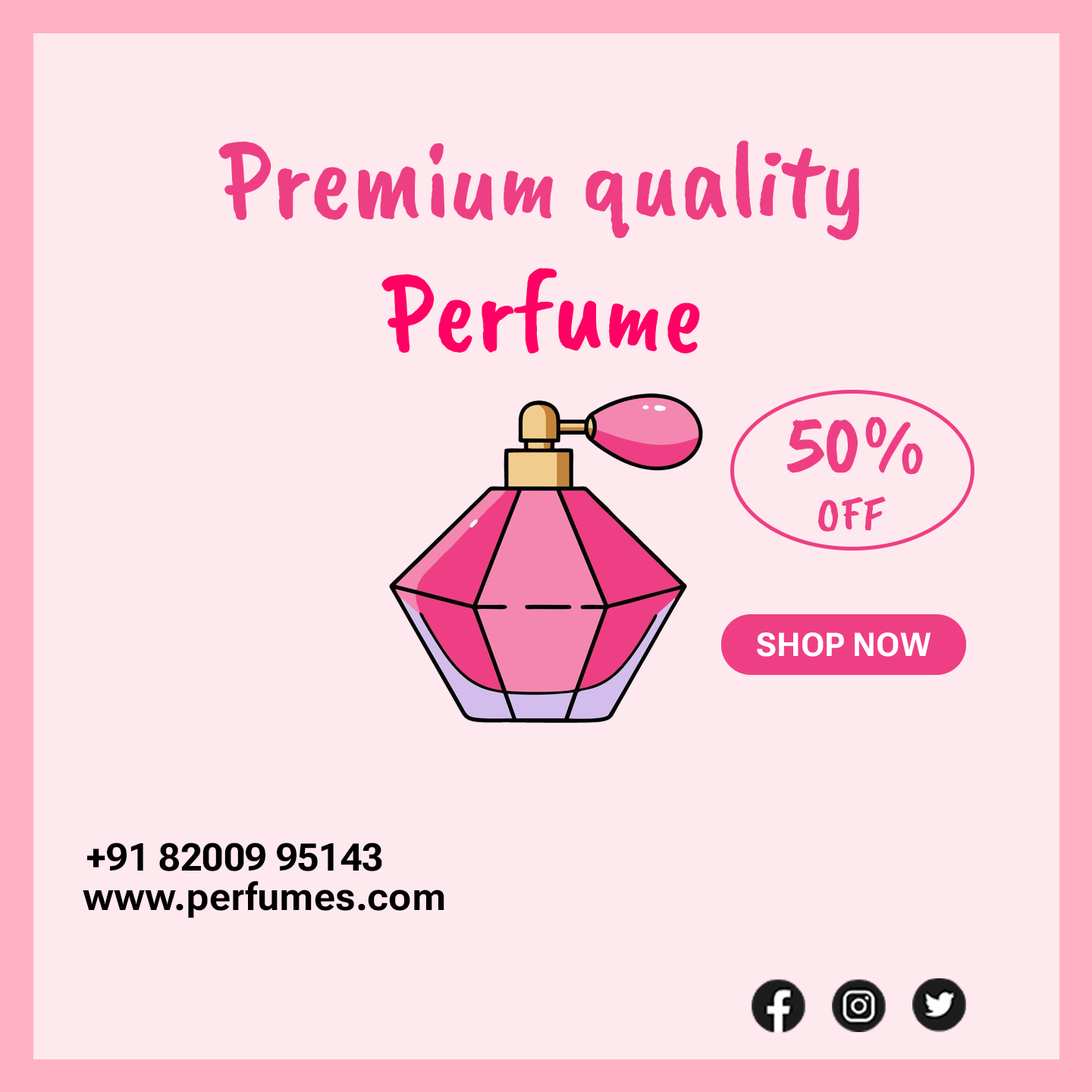
<style>
.page{position:relative;width:1092px;height:1092px;background:#fee9ee}
.page>*{position:absolute;margin:0}
.t1{font:110.6px "CaveatBrush-Regular";color:#ee3f84}
.t2{font:110.6px "CaveatBrush-Regular";color:#ff0065}
.t3{font:82.6px "CaveatBrush-Regular";color:#ee3f84}
.t4{font:47.4px "CaveatBrush-Regular";color:#ee3f84}
.t5{font:32.4px "RobotoFlex-Bold";color:#ffffff}
.t6{font:38.1px "RobotoFlex-Bold";color:#000000}
</style>
<div class="page">
<p class="t1" style="left:218px;top:140px;width:641px;height:214px;text-align:center">Premium quality<br><span class="t2">Perfume</span></p>
<p class="t3" style="left:786px;top:416px;width:137px;height:116px;text-align:center">50% <br><span class="t4">OFF</span></p>
<p class="t5" style="left:757px;top:632px;width:174px;height:25px">SHOP NOW</p>
<p class="t6" style="left:87px;top:842px;width:295px;height:29px">+91 82009 95143</p>
<p class="t6" style="left:83px;top:881px;width:361px;height:37px">www.perfumes.com</p>
</div>
